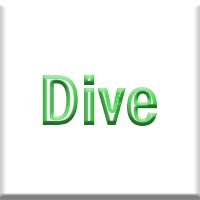
<style>
.page{position:relative;width:200px;height:200px;background:#ffffff}
.page>*{position:absolute;margin:0}
.t1{font:75px "FranklinGothic-DemiCond";color:#ffffff}
</style>
<div class="page">
<p class="t1" style="left:42px;top:74px;width:115px;height:52px">Dive</p>
</div>
